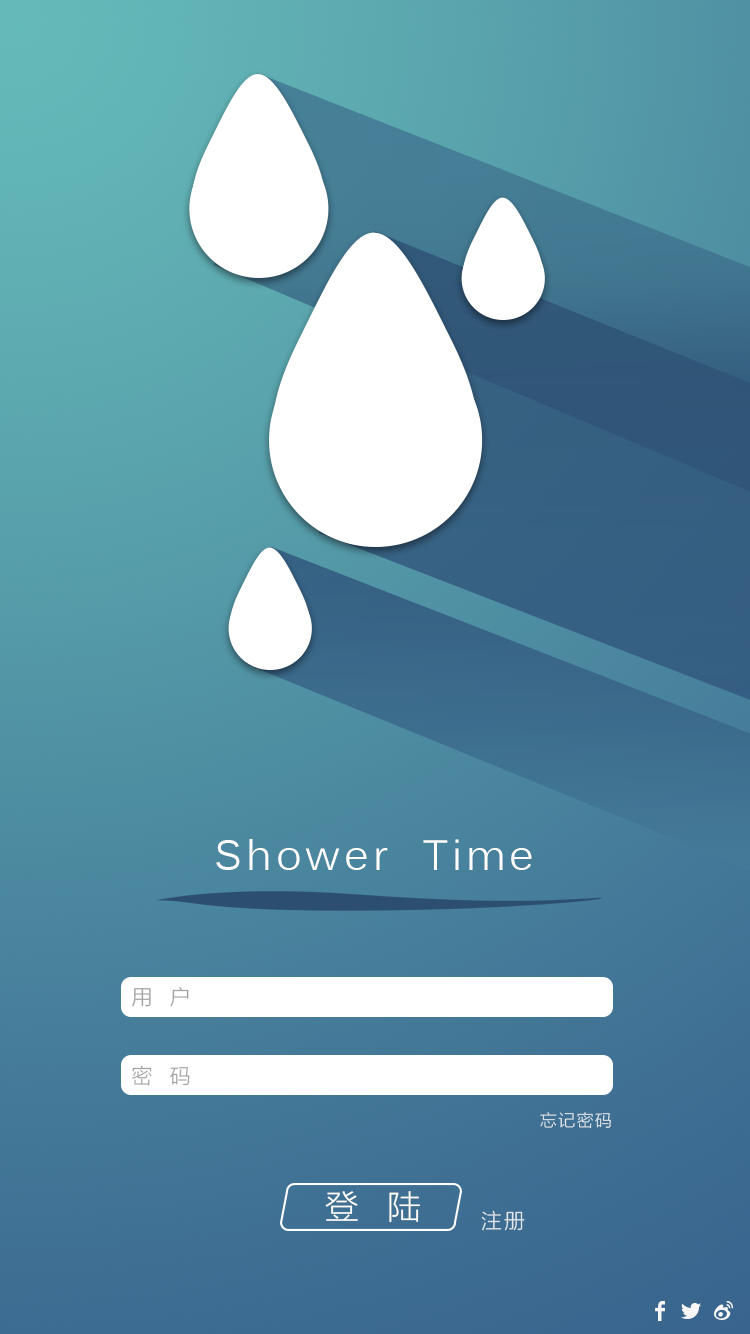
<style>
.page{position:relative;width:750px;height:1334px}
.page>*{position:absolute;margin:0}
.t1{font:41.7px "Kalinga";letter-spacing:0.1em;color:#ffffff}
.t2{font:20.8px "FZLTXHJW--GB1-0";color:#a4a3a3}
.t3{font:16.7px "FZLTXHJW--GB1-0";letter-spacing:0.1em;color:#e2e7ec}
.t4{font:33.3px "FZLTXHJW--GB1-0";letter-spacing:0.1em;color:#ffffff}
.t5{font:20.8px "FZLTXHJW--GB1-0";letter-spacing:0.1em;color:#e1e7ec}
</style>
<div class="page">
<p class="t1" style="left:216px;top:839px;width:316px;height:31px">Shower  Time</p>
<p class="t2" style="left:131px;top:987px;width:58px;height:20px">用   户</p>
<p class="t2" style="left:132px;top:1065px;width:58px;height:21px">密   码</p>
<p class="t3" style="left:540px;top:1112px;width:71px;height:17px">忘记密码</p>
<p class="t4" style="left:325px;top:1191px;width:95px;height:32px">登  陆</p>
<p class="t5" style="left:481px;top:1210px;width:44px;height:21px">注册</p>
</div>
